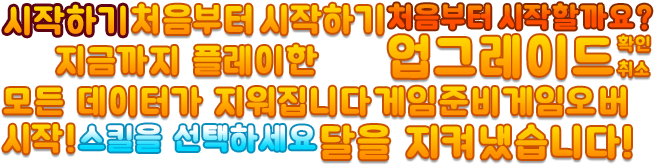
<style>
.page{position:relative;width:655px;height:165px;background:#ffffff}
.page>*{position:absolute;margin:0}
.t1{font:35px "BMJUAOTF";letter-spacing:0.06em;font-weight:bold}
.t2{font:30px "BMJUAOTF";letter-spacing:0.06em;font-weight:bold}
.t3{font:52px "BMJUAOTF";letter-spacing:0.06em;font-weight:bold}
.t4{font:18px "BMJUAOTF";letter-spacing:0.06em;font-weight:bold}
.t5{font:32px "BMJUAOTF";letter-spacing:0.06em;font-weight:bold}
.t6{font:40px "BMJUAOTF";letter-spacing:0.06em;font-weight:bold}
</style>
<div class="page">
<p class="t1" style="left:4px;top:4px;width:122px;height:32px">시작하기</p>
<p class="t1" style="left:132px;top:3px;width:251px;height:32px">처음부터 시작하기</p>
<p class="t2" style="left:388px;top:3px;width:264px;height:27px">처음부터 시작할까요?</p>
<p class="t3" style="left:388px;top:35px;width:225px;height:43px">업그레이드</p>
<p class="t4" style="left:618px;top:35px;width:32px;height:17px">확인</p>
<p class="t1" style="left:56px;top:44px;width:262px;height:31px">지금까지 플레이한</p>
<p class="t4" style="left:618px;top:60px;width:31px;height:17px">취소</p>
<p class="t1" style="left:3px;top:86px;width:367px;height:30px">모든 데이터가 지워집니다</p>
<p class="t1" style="left:375px;top:86px;width:123px;height:30px">게임준비</p>
<p class="t1" style="left:503px;top:86px;width:123px;height:30px">게임오버</p>
<p class="t1" style="left:3px;top:124px;width:71px;height:30px">시작!</p>
<p class="t5" style="left:79px;top:124px;width:237px;height:28px">스킬을 선택하세요</p>
<p class="t6" style="left:321px;top:124px;width:310px;height:36px">달을 지켜냈습니다!</p>
</div>
